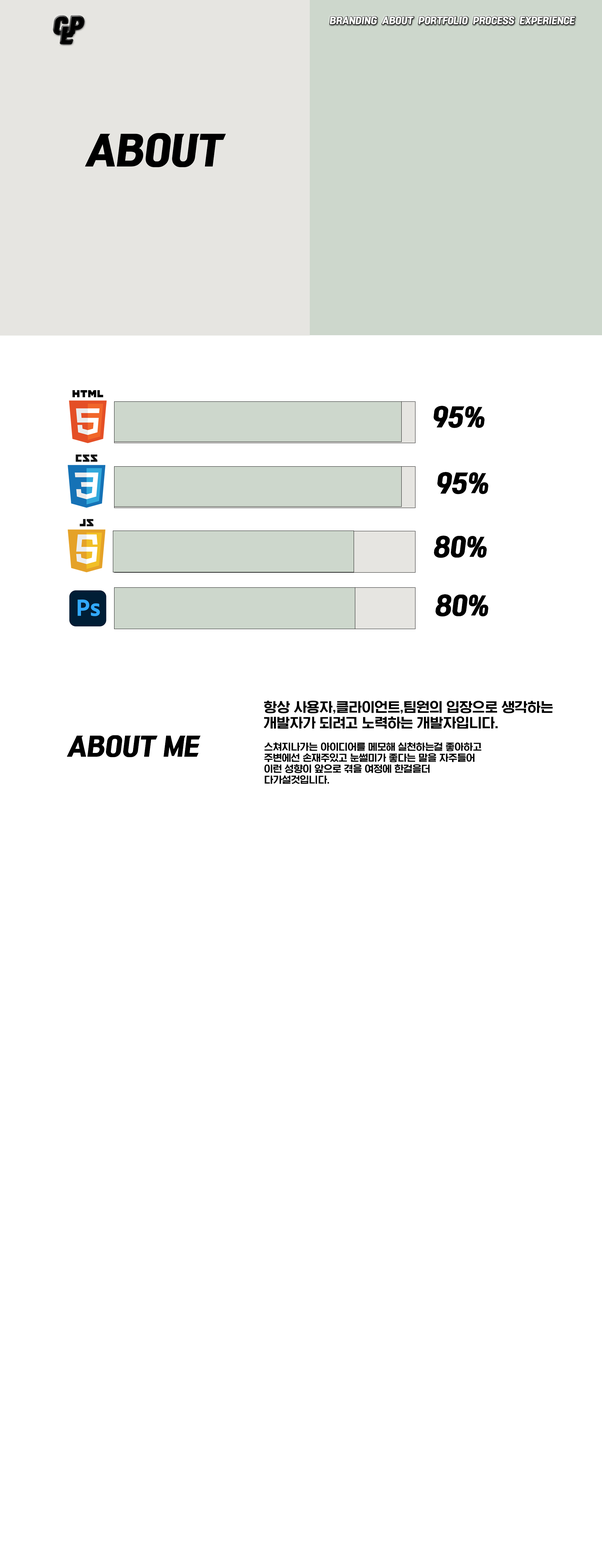
<style>
.page{position:relative;width:602px;height:1568px;background:#ffffff}
.page>*{position:absolute;margin:0}
.t1{font:8.7px "KoreanRKT-R";color:#ffffff}
.t2{font:38.6px "KoreanRKT-R";color:#000000}
.t3{font:24.8px "KoreanRKT-R";color:#000000}
.t4{font:13.1px "KoreanSWGI3-R";color:#000000}
.t5{font:9.1px "KoreanSWGI3-R";color:#000000}
</style>
<div class="page">
<p class="t1" style="left:330px;top:16px;width:245px;height:8px">BRANDING  ABOUT  PORTFOLIO  PROCESS  EXPERIENCE</p>
<p class="t2" style="left:85px;top:133px;width:141px;height:34px">ABOUT</p>
<p class="t3" style="left:434px;top:406px;width:51px;height:22px">95%</p>
<p class="t3" style="left:437px;top:472px;width:52px;height:22px">95%</p>
<p class="t3" style="left:434px;top:536px;width:53px;height:22px">80%</p>
<p class="t3" style="left:436px;top:594px;width:53px;height:23px">80%</p>
<p class="t4" style="left:264px;top:701px;width:289px;height:28px">항상 사용자,클라이언트,팀원의 입장으로 생각하는 개발자가 되려고 노력하는 개발자입니다.</p>
<p class="t3" style="left:67px;top:735px;width:134px;height:22px">ABOUT ME</p>
<p class="t5" style="left:264px;top:742px;width:217px;height:42px">스쳐지나가는 아이디어를 메모해 실천하는걸 좋아하고 주변에선 손재주있고 눈썰미가 좋다는 말을 자주들어<br>이런 성향이 앞으로 겪을 여정에 한걸을더 다가설것입니다.</p>
</div>
